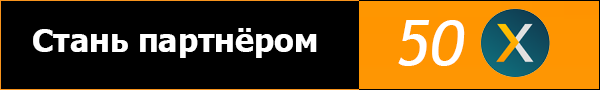
<style>
.page{position:relative;width:600px;height:90px;background:#000000}
.page>*{position:absolute;margin:0}
.t1{font:32px "Tahoma-Bold";color:#ffffff}
.t2{font:64px "TrebuchetMS-Italic";color:#ffffff}
</style>
<div class="page">
<p class="t1" style="left:33px;top:28px;width:284px;height:30px">Стань партнёром</p>
<p class="t2" style="left:398px;top:20px;width:67px;height:46px">50</p>
</div>
